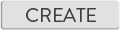
<style>
.page{position:relative;width:120px;height:30px;background:#dfe1e2}
.page>*{position:absolute;margin:0}
.t1{font:19.6px "BrandonGrotesque-Regular";color:#404041}
</style>
<div class="page">
<p class="t1" style="left:26px;top:8px;width:70px;height:14px">CREATE</p>
</div>
